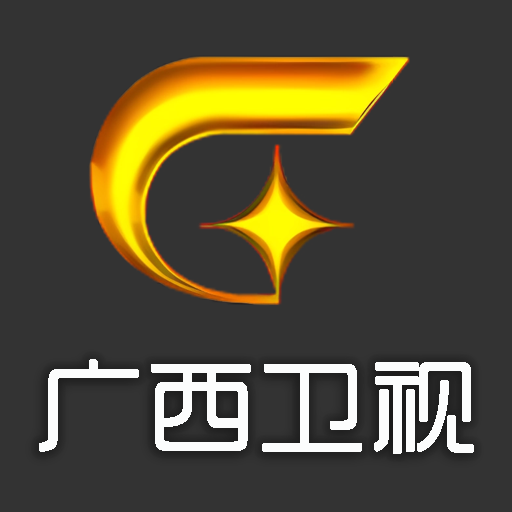
<style>
.page{position:relative;width:512px;height:512px;background:#333333}
.page>*{position:absolute;margin:0}
.t1{font:106.7px "SJshishang-Regular";letter-spacing:0.02em;color:#fcfdfd;font-weight:bold}
</style>
<div class="page">
<p class="t1" style="left:39px;top:359px;width:435px;height:95px">广西卫视</p>
</div>
